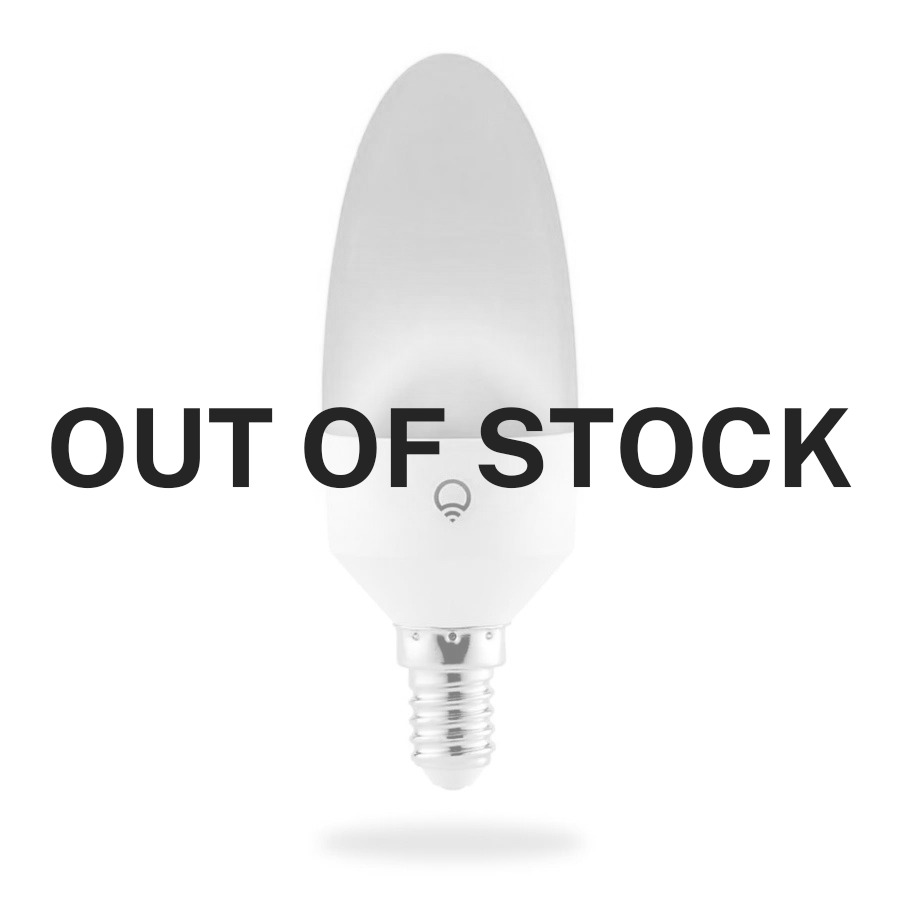
<style>
.page{position:relative;width:900px;height:899px;background:#ffffff}
.page>*{position:absolute;margin:0}
.t1{font:108.9px "PublicSans-Bold";color:#252525}
</style>
<div class="page">
<p class="t1" style="left:51px;top:407px;width:801px;height:82px">OUT OF STOCK</p>
</div>
